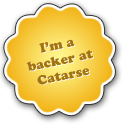
<style>
.page{position:relative;width:128px;height:128px;background:#ffffff}
.page>*{position:absolute;margin:0}
.t1{font:13px "CooperBlackStd";color:#a3730f}
.t2{font:13px "CooperBlackStd"}
</style>
<div class="page">
<p class="t1" style="left:26px;top:39px;width:67px;height:46px;text-align:center;rotate:-12deg">I’m a<br>backer at<br>Catarse</p>
<p class="t2" style="left:27px;top:40px;width:67px;height:45px;text-align:center;rotate:-12deg">I’m a<br>backer at<br>Catarse</p>
</div>
